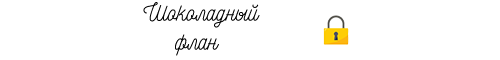
<style>
.page{position:relative;width:500px;height:60px;background:#ffffff}
.page>*{position:absolute;margin:0}
.t1{font:24px "Nickainley-Normal";color:#000000}
.t2{font:30px "Nickainley-Normal";color:#000000}
</style>
<div class="page">
<p class="t1" style="left:143px;top:2px;width:117px;height:54px;text-align:center"><span class="t2"> </span>Шоколадный флан</p>
</div>
